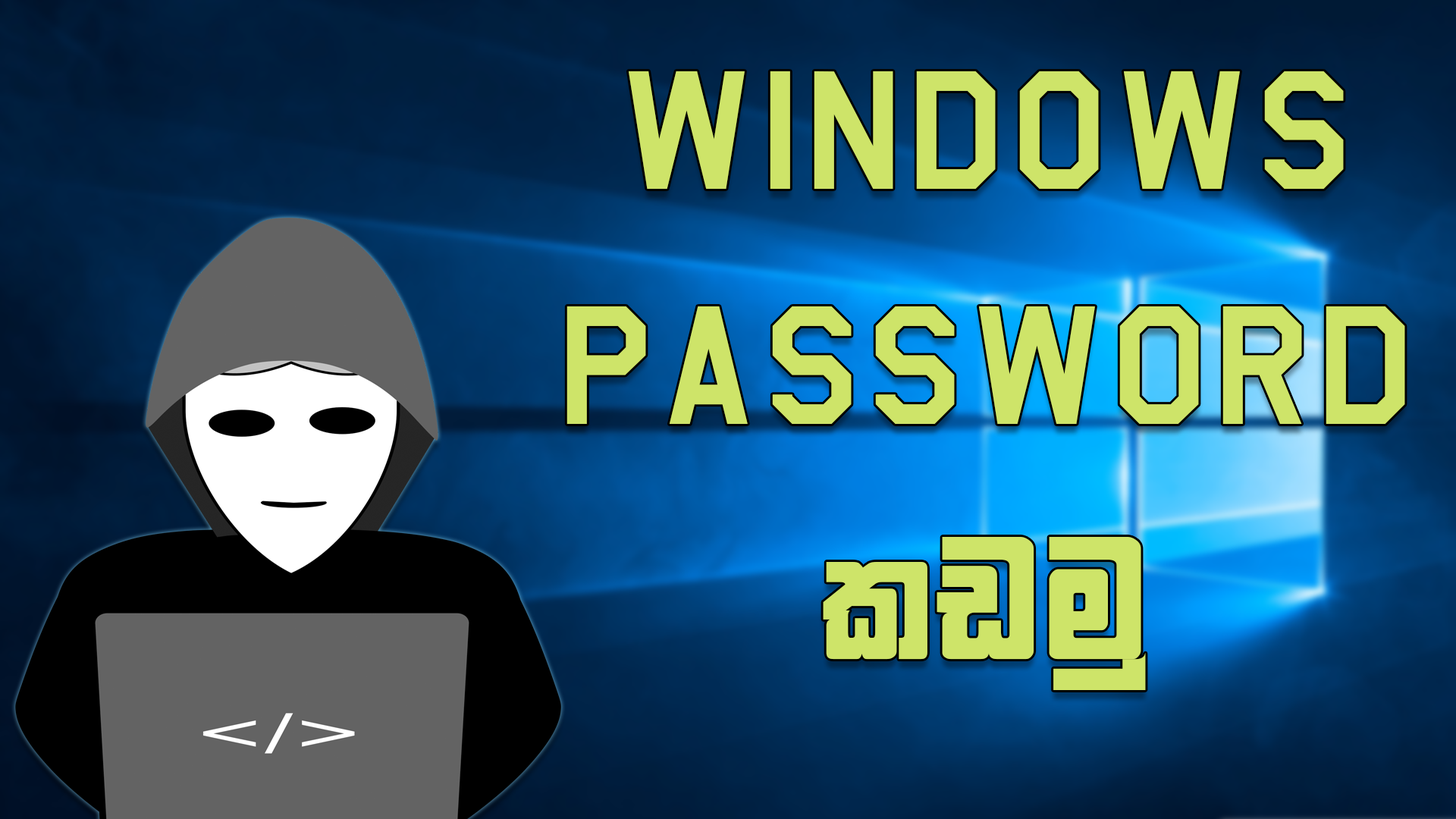
<style>
.page{position:relative;width:1456px;height:819px}
.page>*{position:absolute;margin:0}
.t1{font:195.9px "AmarilloUSAF";letter-spacing:0.025em;color:#cee469}
.t2{font:195.9px "FMGemunux";letter-spacing:0.025em;color:#cee469}
</style>
<div class="page">
<p class="t1" style="left:566px;top:71px;width:839px;height:619px;text-align:center">windows password<span class="t2"> lvuq</span></p>
</div>
